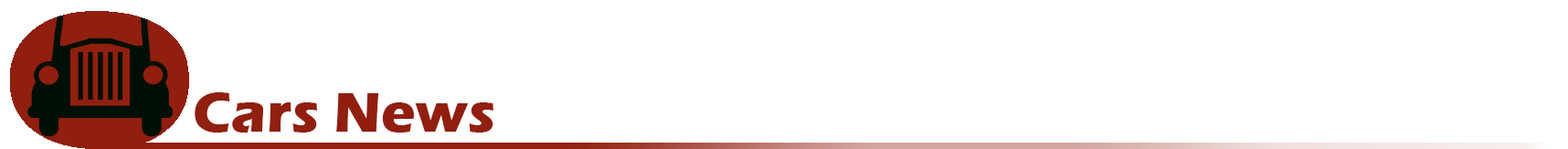
<style>
.page{position:relative;width:1568px;height:149px;background:#ffffff}
.page>*{position:absolute;margin:0}
.t1{font:57.3px "ErasITC-Bold";color:#901f10}
</style>
<div class="page">
<p class="t1" style="left:195px;top:92px;width:298px;height:40px">Cars News</p>
</div>
